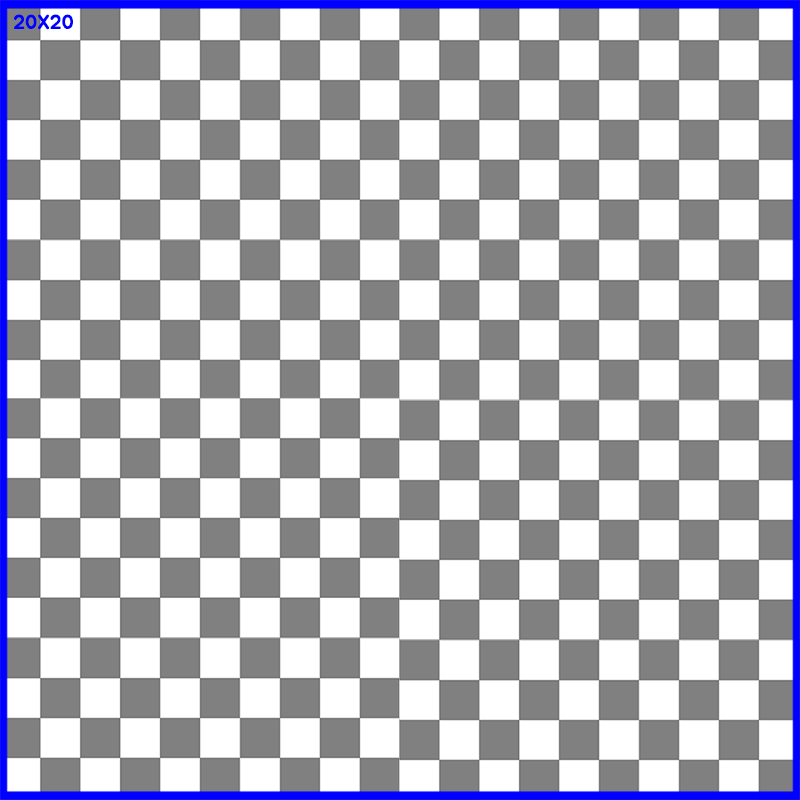
<style>
.page{position:relative;width:800px;height:800px;background:#ffffff}
.page>*{position:absolute;margin:0}
.t1{font:20px "BMJUA";color:#0000ff}
</style>
<div class="page">
<p class="t1" style="left:14px;top:14px;width:59px;height:16px">20X20</p>
</div>
